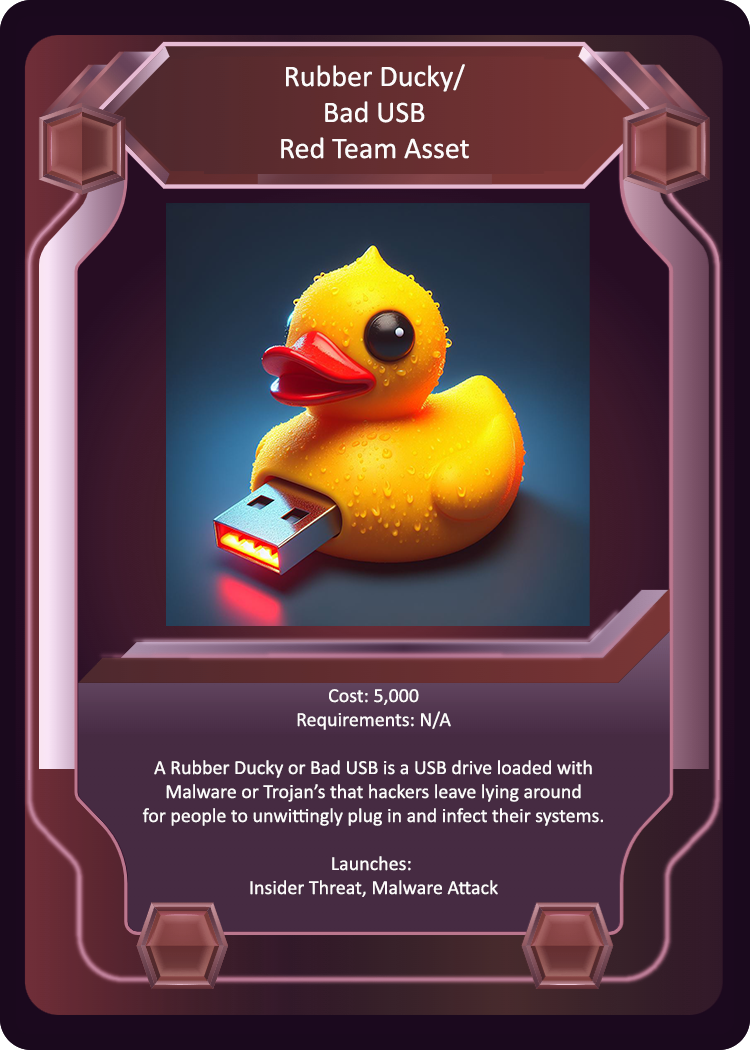
<style>
.page{position:relative;width:750px;height:1050px}
.page>*{position:absolute;margin:0}
.t1{font:30px "Calibri";color:#fcfbfb}
.t2{font:20px "Calibri";color:#fcfbfb}
</style>
<div class="page">
<p class="t1" style="left:281px;top:64px;width:188px;height:95px;text-align:center">Rubber Ducky/<br>Bad USB<br>Red Team Asset</p>
<p class="t2" style="left:142px;top:689px;width:461px;height:208px;text-align:center">Cost: 5,000<br>Requirements: N/A<br><br>A Rubber Ducky or Bad USB is a USB drive loaded with<br>Malware or Trojan’s that hackers leave lying around<br>for people to unwittingly plug in and infect their systems.<br><br>Launches: <br>Insider Threat, Malware Attack</p>
</div>
